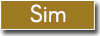
<style>
.page{position:relative;width:100px;height:36px;background:#9d7922}
.page>*{position:absolute;margin:0}
.t1{font:24px "Arcon-Regular";color:#ffffff}
</style>
<div class="page">
<p class="t1" style="left:30px;top:4px;width:36px;height:19px">Sim</p>
</div>
